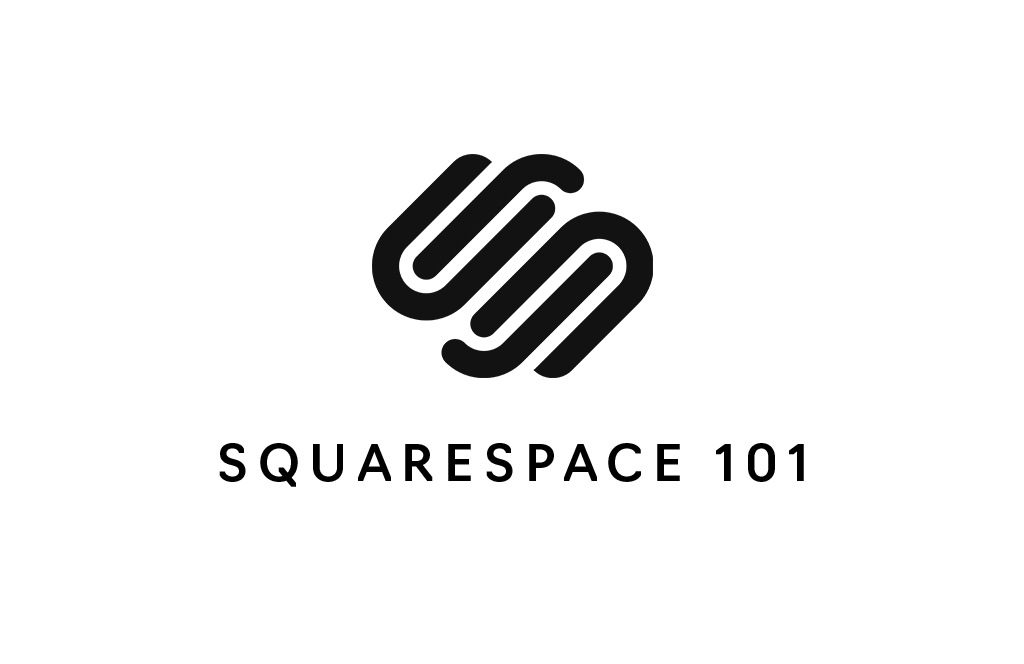
<style>
.page{position:relative;width:1024px;height:664px;background:#ffffff}
.page>*{position:absolute;margin:0}
.t1{font:50px "Navigo-Medium";letter-spacing:0.2em;color:#000000}
</style>
<div class="page">
<p class="t1" style="left:219px;top:443px;width:585px;height:44px">SQUARESPACE 101</p>
</div>
